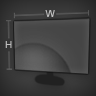
<style>
.page{position:relative;width:96px;height:96px}
.page>*{position:absolute;margin:0}
.t1{font:10.1px "ArialMT";color:#c0c0c0}
.t2{font:10.1px "ArialMT";color:#bebebe}
</style>
<div class="page">
<p class="t1" style="left:45px;top:10px;width:10px;height:7px">W</p>
<p class="t2" style="left:5px;top:41px;width:7px;height:7px">H</p>
</div>
